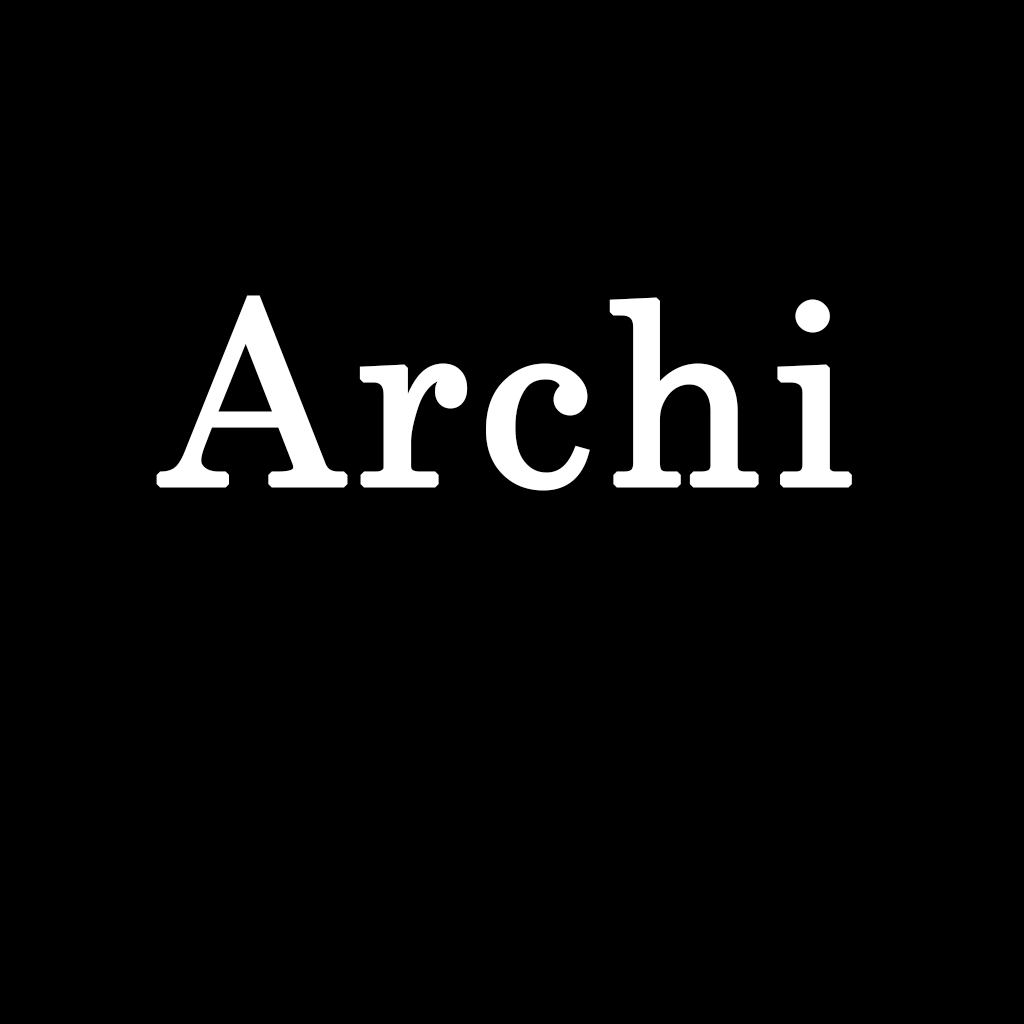
<style>
.page{position:relative;width:1024px;height:1024px;background:#000000}
.page>*{position:absolute;margin:0}
.t1{font:250px "CenturySchoolbook";letter-spacing:0.03em;color:#ffffff;font-weight:bold}
</style>
<div class="page">
<p class="t1" style="left:156px;top:295px;width:696px;height:196px">Archi</p>
</div>
